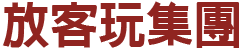
<style>
.page{position:relative;width:243px;height:49px;background:#902420}
.page>*{position:absolute;margin:0}
.t1{font:49px "LinGothic-Heavy";color:#902420}
</style>
<div class="page">
<p class="t1" style="left:2px;top:1px;width:237px;height:47px">放客玩集團</p>
</div>
